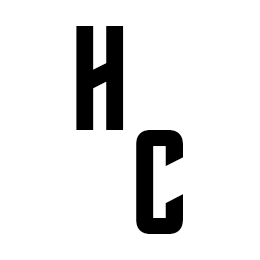
<style>
.page{position:relative;width:260px;height:260px;background:#ffffff}
.page>*{position:absolute;margin:0}
.t1{font:150px "FinalFrontierOldStyle";color:#000000}
</style>
<div class="page">
<p class="t1" style="left:76px;top:26px;width:48px;height:104px">H</p>
<p class="t1" style="left:136px;top:130px;width:47px;height:104px">C</p>
</div>
